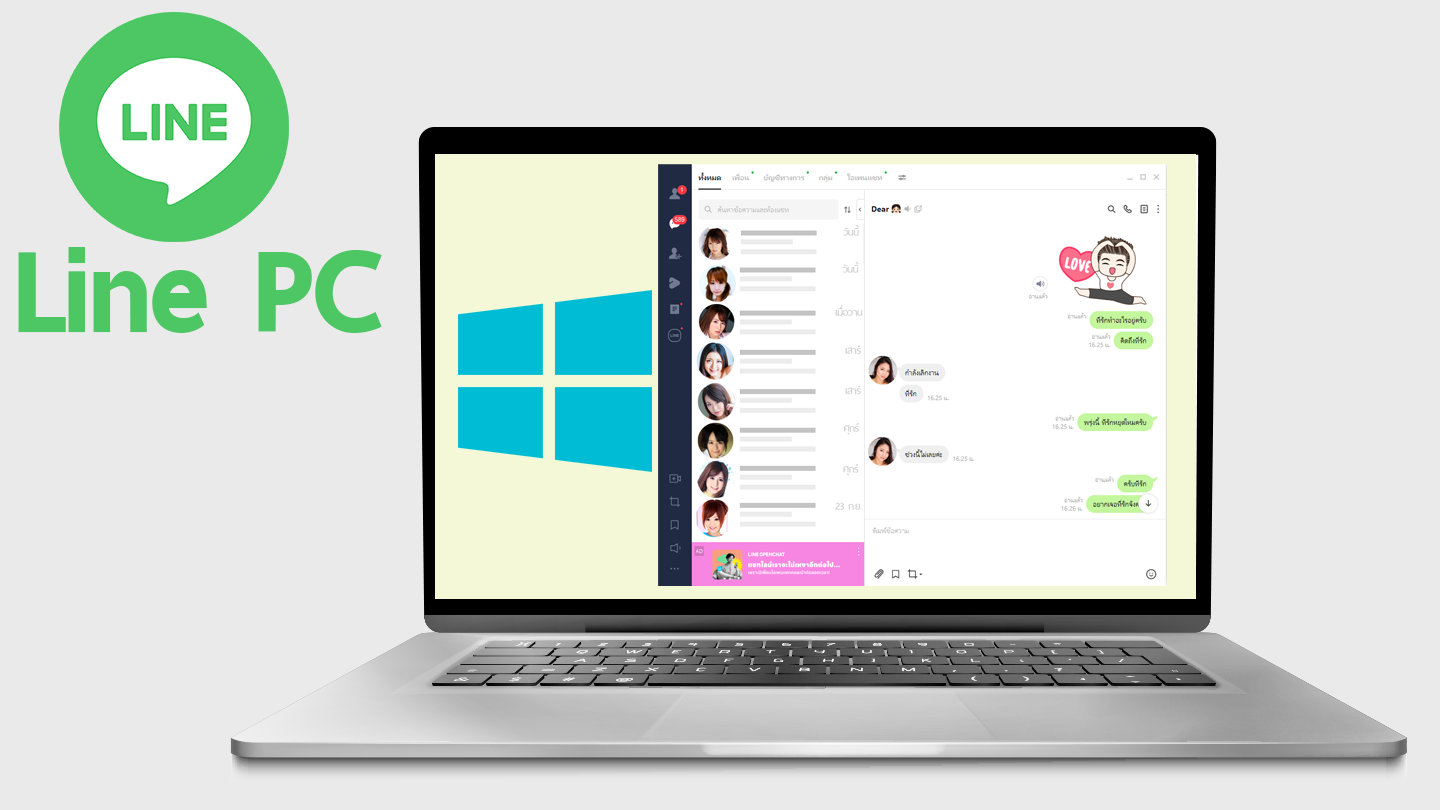
<style>
.page{position:relative;width:1440px;height:810px;background:#eaeaea}
.page>*{position:absolute;margin:0}
.t1{font:150px "ThaiSansNeue-UltraBold";letter-spacing:-0.02em;color:#4cc764}
</style>
<div class="page">
<p class="t1" style="left:18px;top:247px;width:364px;height:86px">Line PC</p>
</div>
